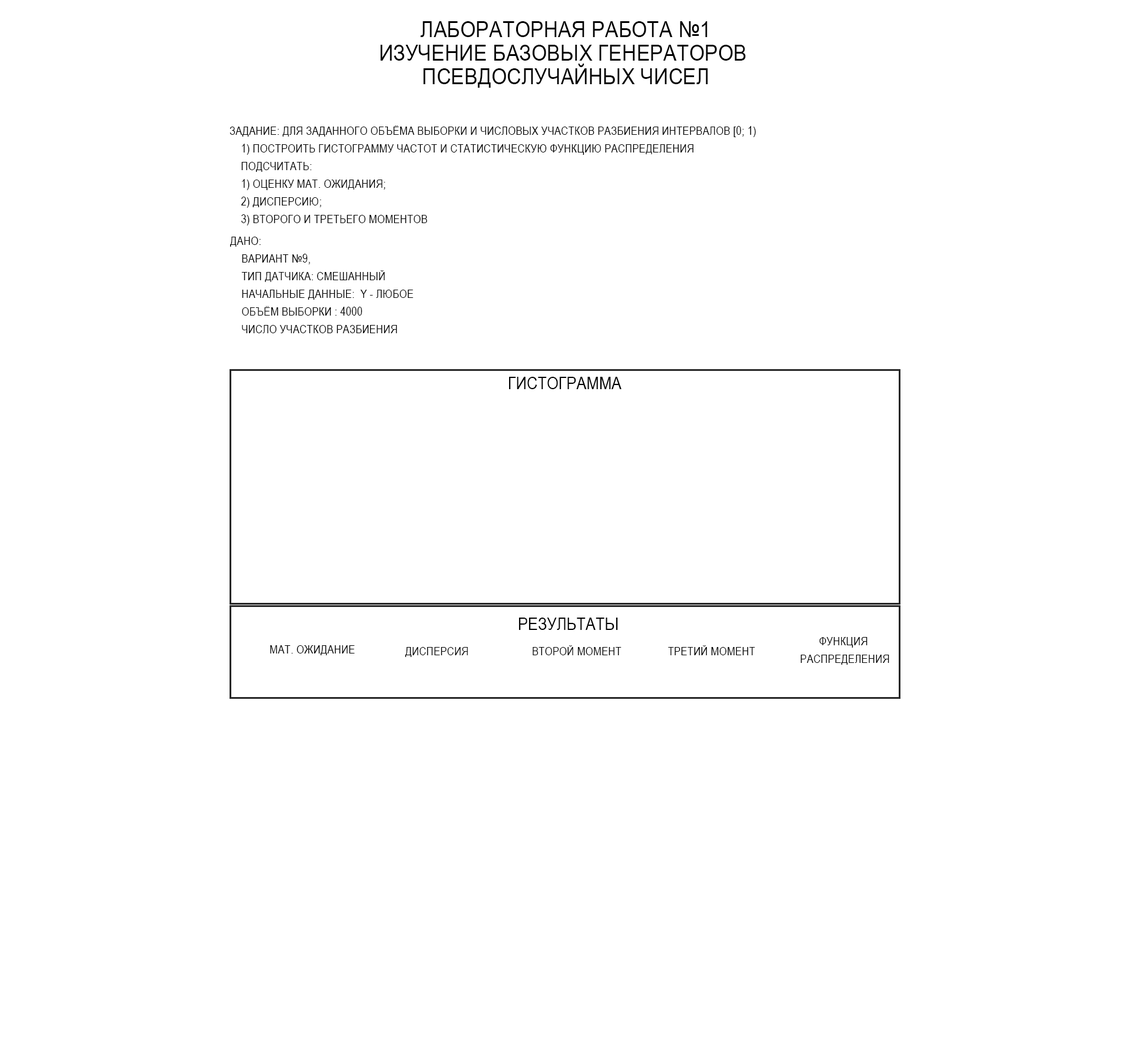
<style>
.page{position:relative;width:1130px;height:1055px;background:#ffffff}
.page>*{position:absolute;margin:0}
.t1{font:22.6px/23.5px "ArialNarrow";letter-spacing:0.01em;color:#000000;text-transform:uppercase;scale:1.06 1}
.t2{font:11.3px/17.7px "ArialNarrow";letter-spacing:0.01em;color:#000000;text-transform:uppercase;scale:1.06 1}
.t3{font:17px "ArialNarrow";letter-spacing:0.01em;color:#000000;text-transform:uppercase;scale:1.06 1}
.t4{font:11.3px "ArialNarrow";letter-spacing:0.01em;color:#000000;text-transform:uppercase;scale:1.06 1}
</style>
<div class="page">
<p class="t1" style="left:380px;top:21px;width:366px;height:67px;text-align:center">Лабораторная работа №1<br>Изучение базовых генераторов <br>псевдослучайных чисел</p>
<p class="t2" style="left:230px;top:125px;width:526px;height:100px">Задание: Для заданного объёма выборки и числовых участков разбиения интервалов [0; 1)<br>    1) Построить гистограмму частот и статистическую функцию распределения<br>    Подсчитать:<br>    1) Оценку мат. ожидания;<br>    2) Дисперсию;<br>    3) Второго и третьего моментов</p>
<p class="t2" style="left:230px;top:237px;width:183px;height:96px">Дано:<br>    Вариант №9, <br>    Тип датчика: Смешанный<br>    Начальные данные:  y - любое<br>    объём выборки : 4000<br>    Число участков разбиения</p>
<p class="t3" style="left:509px;top:377px;width:113px;height:12px">Гистограмма</p>
<p class="t3" style="left:519px;top:618px;width:99px;height:12px">Результаты</p>
<p class="t2" style="left:801px;top:637px;width:89px;height:28px;text-align:center">Функция <br>распределения</p>
<p class="t4" style="left:270px;top:645px;width:85px;height:10px">Мат. ожидание</p>
<p class="t4" style="left:405px;top:647px;width:63px;height:10px">Дисперсия</p>
<p class="t4" style="left:533px;top:645px;width:89px;height:10px">Второй момент</p>
<p class="t4" style="left:668px;top:645px;width:87px;height:10px">Третий момент</p>
</div>
